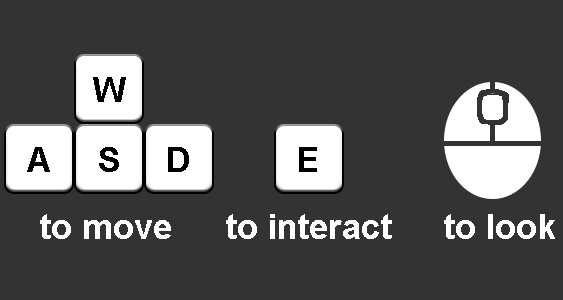
<style>
.page{position:relative;width:563px;height:300px;background:#333333}
.page>*{position:absolute;margin:0}
.t1{font:35px "Arial-BoldMT";color:#000000}
.t2{font:35px "Arial-BoldMT";color:#ffffff}
</style>
<div class="page">
<p class="t1" style="left:93px;top:77px;width:33px;height:25px">W</p>
<p class="t1" style="left:27px;top:147px;width:23px;height:25px">A</p>
<p class="t1" style="left:99px;top:147px;width:20px;height:25px">S</p>
<p class="t1" style="left:168px;top:147px;width:21px;height:25px">D</p>
<p class="t1" style="left:299px;top:147px;width:18px;height:25px">E</p>
<p class="t2" style="left:40px;top:214px;width:131px;height:25px">to move</p>
<p class="t2" style="left:226px;top:214px;width:166px;height:25px">to interact</p>
<p class="t2" style="left:444px;top:214px;width:111px;height:25px">to look</p>
</div>
